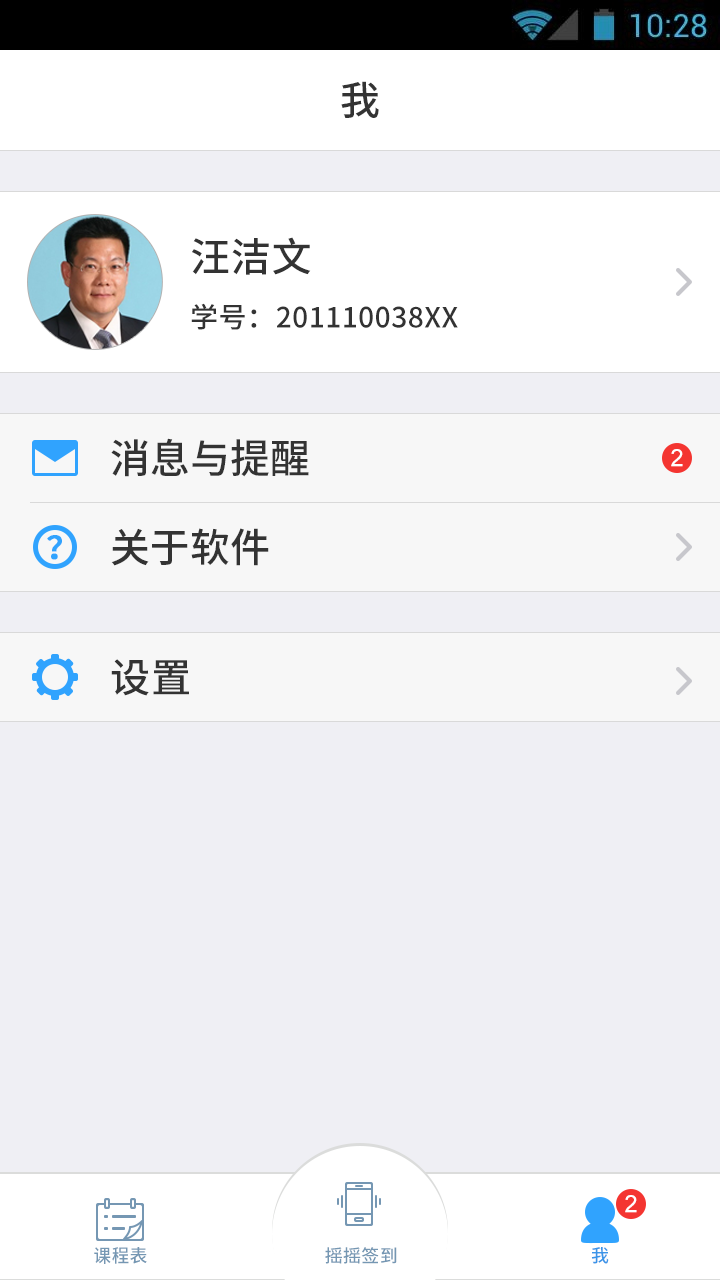
<style>
.page{position:relative;width:720px;height:1280px;background:#efeff4}
.page>*{position:absolute;margin:0}
.t1{font:40px "NotoSansHans-Medium";color:#333333}
.t2{font:28px/28px "NotoSansHans-Medium";letter-spacing:0.02em;color:#333333}
.t3{font:40px/28px "NotoSansHans-Medium";letter-spacing:0.02em;color:#333333}
.t4{font:24px "ArialMT";letter-spacing:0.02em;color:#ffffff}
.t5{font:32px "NotoSansHans-Medium";color:#30a3fe;font-weight:bold}
.t6{font:40px "NotoSansHans-Medium";letter-spacing:0.02em;color:#333333}
.t7{font:18.2px "NotoSansHans-Medium";letter-spacing:0.02em;color:#7597b3}
.t8{font:18.1px "NotoSansHans-Medium";letter-spacing:0.02em;color:#7597b3}
.t9{font:18px "NotoSansHans-Medium";letter-spacing:0.02em;color:#3b95e8}
</style>
<div class="page">
<p class="t1" style="left:341px;top:81px;width:38px;height:37px">我</p>
<p class="t2" style="left:191px;top:237px;width:267px;height:93px"><span class="t3">汪洁文<br><br></span>学号：201110038XX</p>
<p class="t1" style="left:111px;top:438px;width:198px;height:39px">消息与提醒</p>
<p class="t4" style="left:671px;top:449px;width:12px;height:18px">2</p>
<p class="t1" style="left:111px;top:528px;width:158px;height:38px">关于软件</p>
<p class="t5" style="left:47px;top:535px;width:15px;height:25px">？</p>
<p class="t6" style="left:111px;top:659px;width:78px;height:37px">设置</p>
<p class="t4" style="left:625px;top:1195px;width:12px;height:18px">2</p>
<p class="t7" style="left:94px;top:1247px;width:53px;height:17px">课程表</p>
<p class="t8" style="left:325px;top:1247px;width:72px;height:17px">摇摇签到</p>
<p class="t9" style="left:591px;top:1247px;width:18px;height:17px">我</p>
</div>
